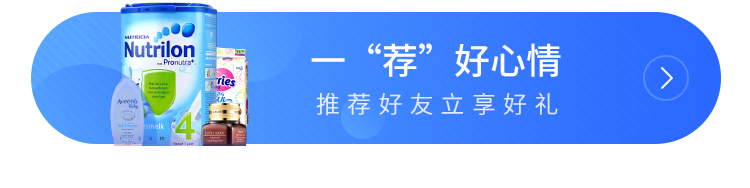
<style>
.page{position:relative;width:750px;height:188px;background:#ffffff}
.page>*{position:absolute;margin:0}
.t1{font:36px "SourceHanSansCN-Medium";color:#ffffff}
.t2{font:24px "SourceHanSansCN-Regular";letter-spacing:0.3em;color:#e1e9ff}
</style>
<div class="page">
<p class="t1" style="left:311px;top:43px;width:250px;height:34px">一“荐”好心情</p>
<p class="t2" style="left:316px;top:92px;width:242px;height:24px">推荐好友立享好礼</p>
</div>
